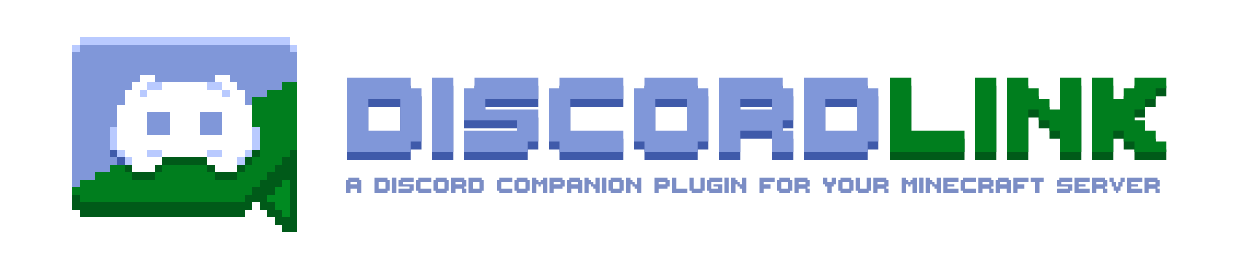
<style>
.page{position:relative;width:1241px;height:271px;background:#ffffff}
.page>*{position:absolute;margin:0}
.t1{font:170px "ThaleahFat";color:#8097d9}
.t2{font:170px "ThaleahFat";color:#007e1e}
.t3{font:35px "ThaleahFat";color:#7b8dc5}
</style>
<div class="page">
<p class="t1" style="left:347px;top:77px;width:532px;height:75px">DISCORD</p>
<p class="t2" style="left:890px;top:77px;width:277px;height:75px">LINK</p>
<p class="t3" style="left:346px;top:177px;width:814px;height:16px">A discord companion plugin for your minecraft server</p>
</div>
